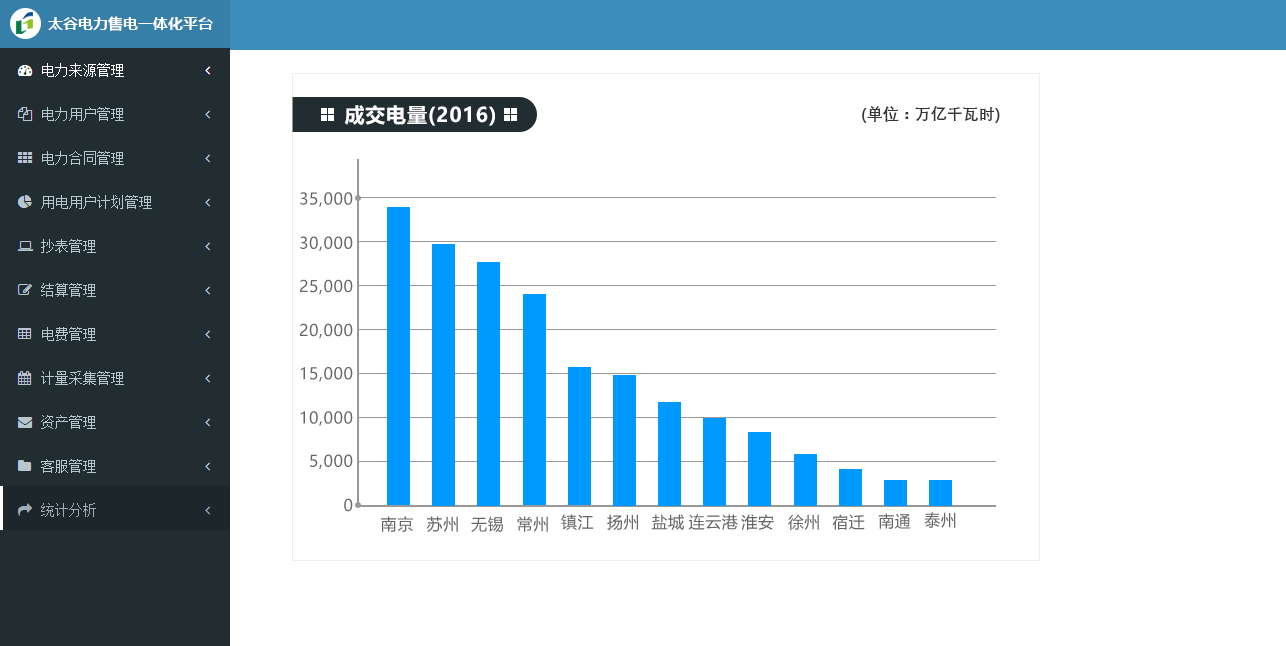
<style>
.page{position:relative;width:1286px;height:646px;background:#ffffff}
.page>*{position:absolute;margin:0}
.t1{font:15px "MicrosoftYaHei-Bold";color:#ffffff}
.t2{font:20px "MicrosoftYaHei-Bold";letter-spacing:0.04em;color:#ffffff}
.t3{font:16px "DengXian-Bold";color:#333333}
.t4{font:16px "MicrosoftYaHei";letter-spacing:0.04em;color:#666666}
</style>
<div class="page">
<p class="t1" style="left:48px;top:16px;width:165px;height:15px">太谷电力售电一体化平台</p>
<p class="t2" style="left:344px;top:105px;width:151px;height:21px">成交电量(2016)</p>
<p class="t3" style="left:862px;top:106px;width:138px;height:17px">(单位：万亿千瓦时)</p>
<p class="t4" style="left:300px;top:192px;width:53px;height:15px">35,000</p>
<p class="t4" style="left:300px;top:236px;width:53px;height:15px">30,000</p>
<p class="t4" style="left:300px;top:279px;width:53px;height:16px">25,000</p>
<p class="t4" style="left:300px;top:323px;width:53px;height:16px">20,000</p>
<p class="t4" style="left:300px;top:367px;width:53px;height:15px">15,000</p>
<p class="t4" style="left:300px;top:411px;width:53px;height:15px">10,000</p>
<p class="t4" style="left:310px;top:454px;width:43px;height:15px">5,000</p>
<p class="t4" style="left:344px;top:498px;width:9px;height:14px">0</p>
<p class="t4" style="left:381px;top:516px;width:32px;height:16px">南京</p>
<p class="t4" style="left:426px;top:516px;width:32px;height:16px">苏州</p>
<p class="t4" style="left:471px;top:516px;width:32px;height:16px">无锡</p>
<p class="t4" style="left:517px;top:516px;width:31px;height:16px">常州</p>
<p class="t4" style="left:561px;top:514px;width:33px;height:16px">镇江</p>
<p class="t4" style="left:607px;top:514px;width:31px;height:16px">扬州</p>
<p class="t4" style="left:651px;top:514px;width:33px;height:16px">盐城</p>
<p class="t4" style="left:688px;top:514px;width:50px;height:16px">连云港</p>
<p class="t4" style="left:741px;top:514px;width:33px;height:16px">淮安</p>
<p class="t4" style="left:788px;top:514px;width:31px;height:16px">徐州</p>
<p class="t4" style="left:832px;top:514px;width:33px;height:16px">宿迁</p>
<p class="t4" style="left:878px;top:513px;width:33px;height:16px">南通</p>
<p class="t4" style="left:924px;top:512px;width:32px;height:16px">泰州</p>
</div>
